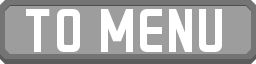
<style>
.page{position:relative;width:256px;height:64px;background:#9d9d9d}
.page>*{position:absolute;margin:0}
.t1{font:50px "GRAYSTROKE";color:#ffffff}
</style>
<div class="page">
<p class="t1" style="left:26px;top:9px;width:196px;height:43px">TO MENU</p>
</div>
